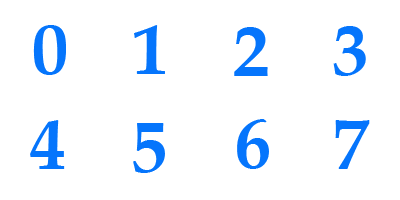
<style>
.page{position:relative;width:400px;height:200px;background:#ffffff}
.page>*{position:absolute;margin:0}
.t1{font:72px "BookAntiqua-Bold";color:#0575fc}
</style>
<div class="page">
<p class="t1" style="left:33px;top:25px;width:33px;height:50px">0</p>
<p class="t1" style="left:134px;top:25px;width:31px;height:49px">1</p>
<p class="t1" style="left:234px;top:27px;width:34px;height:49px">2</p>
<p class="t1" style="left:333px;top:26px;width:33px;height:50px">3</p>
<p class="t1" style="left:30px;top:120px;width:35px;height:49px">4</p>
<p class="t1" style="left:133px;top:123px;width:32px;height:50px">5</p>
<p class="t1" style="left:237px;top:119px;width:32px;height:50px">6</p>
<p class="t1" style="left:335px;top:120px;width:35px;height:49px">7</p>
</div>
